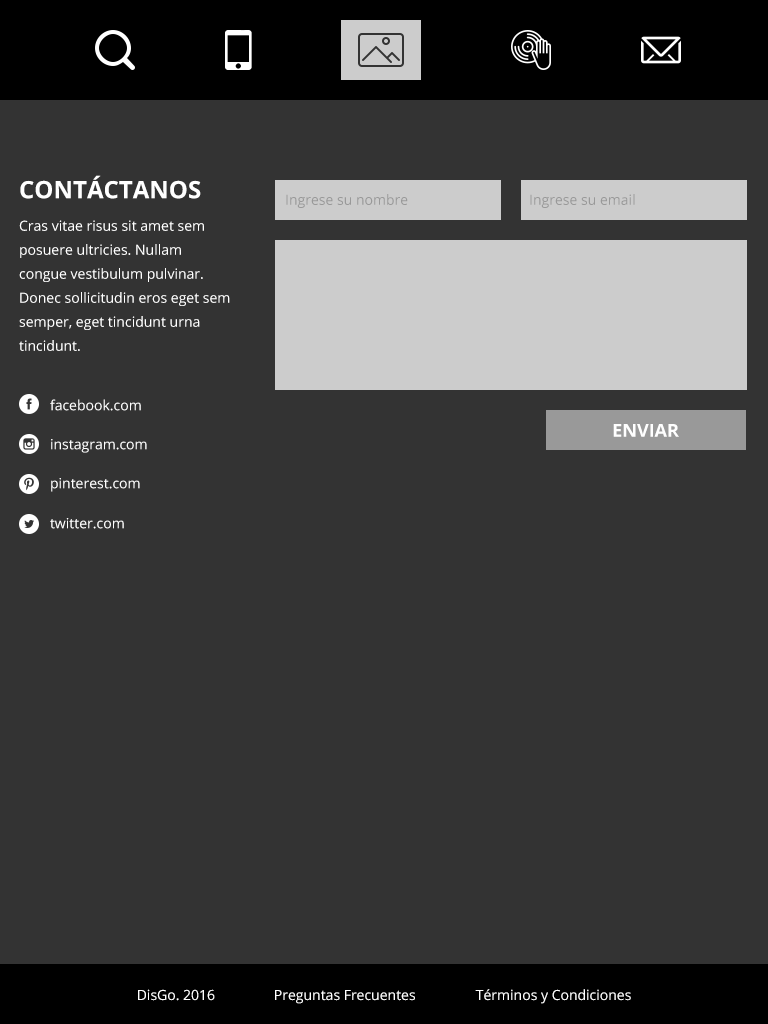
<style>
.page{position:relative;width:768px;height:1024px;background:#333333}
.page>*{position:absolute;margin:0}
.t1{font:24px "OpenSans-Bold";color:#ffffff}
.t2{font:14px "OpenSans";color:#999999}
.t3{font:14px/24px "OpenSans";color:#ffffff}
.t4{font:14px "OpenSans";color:#ffffff}
.t5{font:18px "OpenSans-Bold";color:#ffffff;text-transform:uppercase}
</style>
<div class="page">
<p class="t1" style="left:20px;top:175px;width:181px;height:24px">CONTÁCTANOS</p>
<p class="t2" style="left:286px;top:194px;width:122px;height:14px">Ingrese su nombre</p>
<p class="t2" style="left:530px;top:194px;width:105px;height:14px">Ingrese su email</p>
<p class="t3" style="left:19px;top:220px;width:211px;height:131px">Cras vitae risus sit amet sem posuere ultricies. Nullam congue vestibulum pulvinar. Donec sollicitudin eros eget sem semper, eget tincidunt urna tincidunt.</p>
<p class="t4" style="left:50px;top:399px;width:91px;height:12px">facebook.com</p>
<p class="t5" style="left:613px;top:424px;width:66px;height:13px">Enviar</p>
<p class="t4" style="left:51px;top:439px;width:96px;height:14px">instagram.com</p>
<p class="t4" style="left:51px;top:478px;width:89px;height:14px">pinterest.com</p>
<p class="t4" style="left:50px;top:518px;width:74px;height:11px">twitter.com</p>
<p class="t4" style="left:138px;top:989px;width:77px;height:12px">DisGo. 2016</p>
<p class="t4" style="left:275px;top:990px;width:140px;height:14px">Preguntas Frecuentes</p>
<p class="t4" style="left:475px;top:989px;width:156px;height:15px">Términos y Condiciones</p>
</div>
